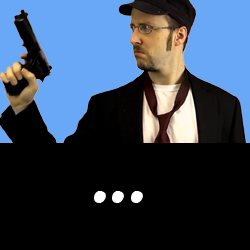
<style>
.page{position:relative;width:250px;height:250px;background:#000000}
.page>*{position:absolute;margin:0}
.t1{font:60px "SoupofJustice";color:#ffffff}
</style>
<div class="page">
<p class="t1" style="left:94px;top:191px;width:49px;height:12px">...</p>
</div>
